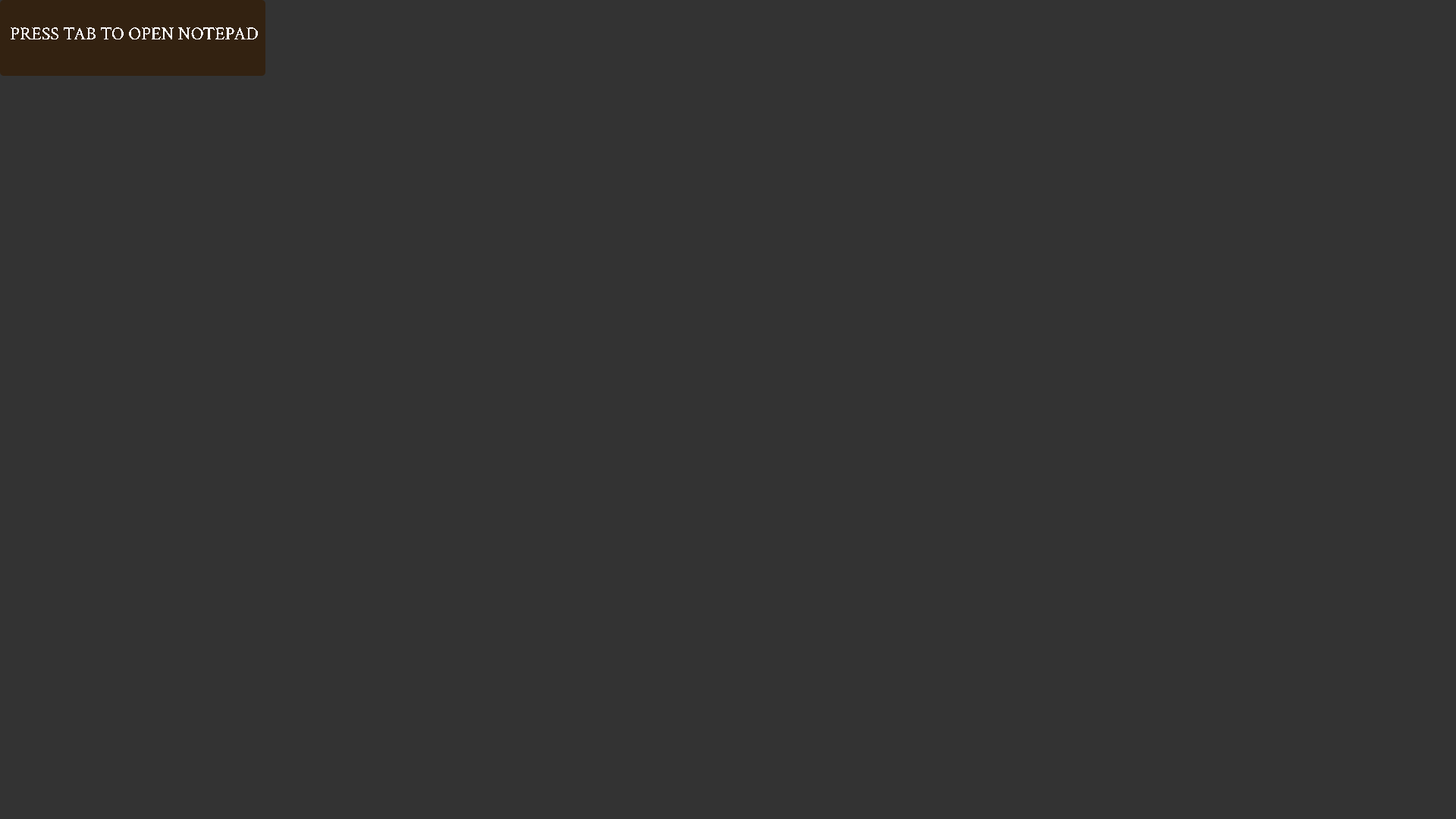
<style>
.page{position:relative;width:1456px;height:819px;background:#333333}
.page>*{position:absolute;margin:0}
.t1{font:18.2px "CrimsonText-Regular";color:#ffffff}
</style>
<div class="page">
<p class="t1" style="left:11px;top:27px;width:247px;height:12px">PRESS TAB TO OPEN NOTEPAD</p>
</div>
